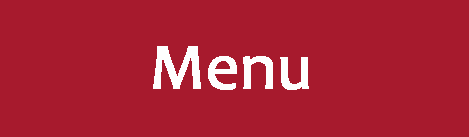
<style>
.page{position:relative;width:469px;height:137px;background:#a71a2d}
.page>*{position:absolute;margin:0}
.t1{font:66px "Candara";letter-spacing:-0.02em;color:#fefefe;font-weight:bold}
</style>
<div class="page">
<p class="t1" style="left:153px;top:46px;width:156px;height:44px">Menu</p>
</div>
